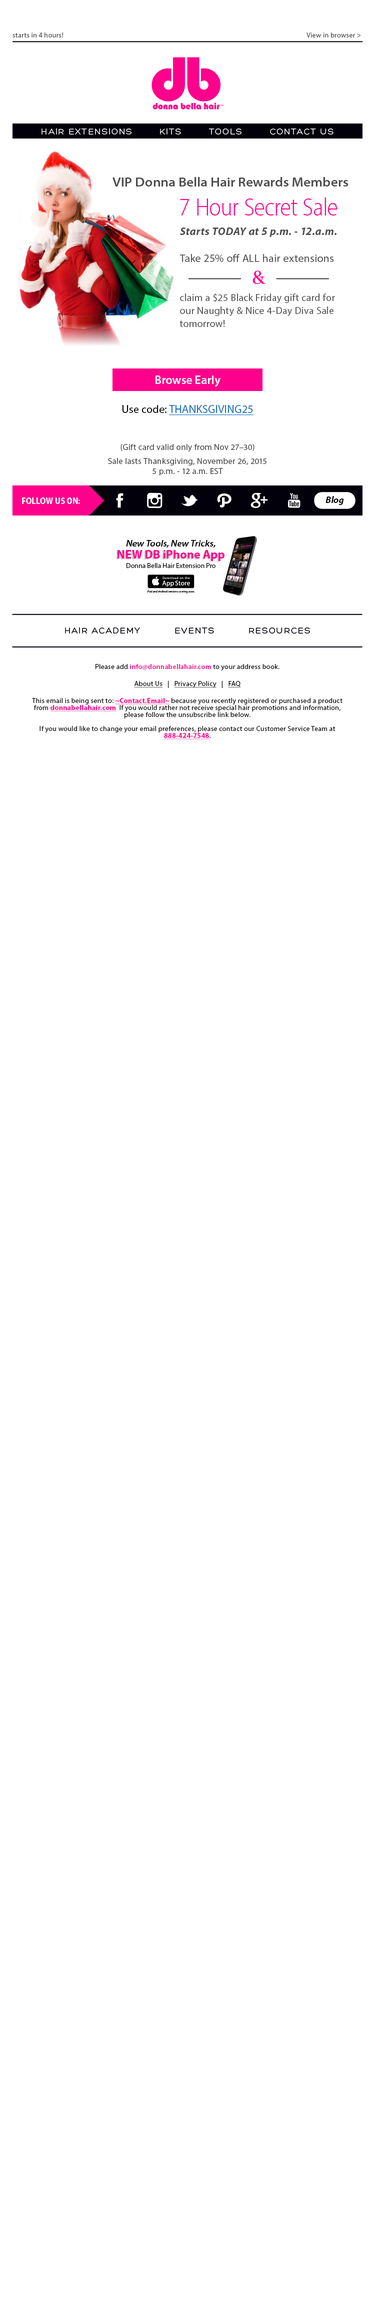
<style>
.page{position:relative;width:375px;height:2317px;background:#ffffff}
.page>*{position:absolute;margin:0}
.t1{font:7px "MyriadPro-Regular";letter-spacing:0.025em;color:#4d4d4f}
.t2{font:9px "Hero";letter-spacing:0.1em;color:#ffffff}
.t3{font:13px "MyriadPro-SemiboldSemiExt";color:#4d4d4f}
.t4{font:25px "MyriadPro-LightSemiCn";color:#ff008c}
.t5{font:11px "MyriadPro-BoldIt";letter-spacing:0.025em;color:#4d4d4f}
.t6{font:10px/13px "MyriadPro-Regular";letter-spacing:0.025em;color:#4d4d4f}
.t7{font:11px/13px "MyriadPro-Regular";letter-spacing:0.025em;color:#4d4d4f}
.t8{font:12px "MyriadPro-Semibold";color:#ffffff}
.t9{font:11.3px "MyriadPro-Regular";color:#1c75bc;text-decoration:underline}
.t10{font:11.3px "MyriadPro-Regular";color:#000000}
.t11{font:8.5px/14.2px "MyriadPro-Regular";letter-spacing:0.025em;color:#4d4d4f}
.t12{font:8.5px "MyriadPro-Regular";letter-spacing:0.025em;color:#4d4d4f}
.t13{font:9px "MyriadPro-BoldSemiCn";color:#ffffff}
.t14{font:9.3px "MyriadPro-BoldIt";color:#01000b}
.t15{font:9px "MyriadPro-SemiboldSemiExtIt";color:#000000}
.t16{font:12px "MyriadPro-Bold";color:#ff008c}
.t17{font:7px "MyriadPro-Regular";color:#000000}
.t18{font:3px "MyriadPro-It";color:#000000}
.t19{font:9px "Hero";letter-spacing:0.1em;color:#01000b}
.t20{font:7px/7px "MyriadPro-Regular";letter-spacing:0.025em;color:#000000}
.t21{font:7px "MyriadPro-Regular";letter-spacing:0.025em;color:#000000}
.t22{font:7px "MyriadPro-Semibold";letter-spacing:0.025em;color:#ff008c}
.t23{font:7px "MyriadPro-Regular";letter-spacing:0.025em;color:#000000;text-decoration:underline}
.t24{font:7px "MyriadPro-Bold";letter-spacing:0.025em;color:#ff008c;text-decoration:underline}
.t25{font:7px/7px "MyriadPro-Bold";letter-spacing:0.025em;color:#ff008c;text-decoration:underline}
</style>
<div class="page">
<p class="t1" style="left:12px;top:32px;width:349px;height:6px">starts in 4 hours!                           View in browser &gt;</p>
<p class="t2" style="left:42px;top:128px;width:292px;height:7px">HAIR EXTENSIONS        KITS        TOOLS        CONTACT US</p>
<p class="t3" style="left:112px;top:177px;width:236px;height:9px">VIP Donna Bella Hair Rewards Members</p>
<p class="t4" style="left:180px;top:198px;width:157px;height:18px">7 Hour Secret Sale</p>
<p class="t5" style="left:180px;top:228px;width:156px;height:9px">Starts TODAY at 5 p.m.­ - 12.a.m.</p>
<p class="t6" style="left:180px;top:254px;width:155px;height:73px"><span class="t7">Take 25% off ALL hair extensions</span><br> <br><br>claim a $25 Black Friday gift card for our Naughty &amp; Nice 4­-Day Diva Sale tomorrow!</p>
<p class="t8" style="left:156px;top:376px;width:64px;height:11px">Browse Early</p>
<p class="t9" style="left:122px;top:405px;width:132px;height:11px"><span class="t10">Use code: </span>THANKSGIVING25</p>
<p class="t11" style="left:108px;top:444px;width:158px;height:32px;text-align:center"><span class="t12">(Gift card valid only from Nov 27–30)<br></span>Sale lasts Thanksgiving, November 26, 2015<br><span class="t12">5 p.m. ­- 12 a.m. EST</span></p>
<p class="t13" style="left:22px;top:498px;width:58px;height:6px">FOLLOW US ON:</p>
<p class="t14" style="left:326px;top:496px;width:18px;height:9px">Blog</p>
<p class="t15" style="left:126px;top:540px;width:90px;height:8px">New Tools, New Tricks,</p>
<p class="t16" style="left:118px;top:550px;width:106px;height:11px">NEW DB iPhone App</p>
<p class="t17" style="left:126px;top:563px;width:90px;height:5px">Donna Bella Hair Extension Pro</p>
<p class="t18" style="left:147px;top:590px;width:47px;height:4px">iPad and Android versions coming soon.</p>
<p class="t19" style="left:65px;top:627px;width:245px;height:7px">HAIR ACADEMY          EVENTS          RESOURCES</p>
<p class="t20" style="left:32px;top:664px;width:310px;height:76px;text-align:center"><span class="t21">Please add </span><span class="t22">info@donnabellahair.com</span><span class="t21"> to your address book.<br><br></span><span class="t23">About Us</span><span class="t21">   |   </span><span class="t23">Privacy Policy</span><span class="t21">   |   </span><span class="t23">FAQ<br></span><span class="t21"><br>This email is being sent to: </span><span class="t24">~Contact.Email~</span><span class="t21"> because you recently registered </span>or purchased a product from <span class="t25">donnabellahair.com</span>  If you would rather not receive special hair promotions and information, please follow the unsubscribe link below.<br><br>If you would like to change your email preferences, please contact our Customer Service Team at <span class="t25">888-424-7548</span>.</p>
</div>
